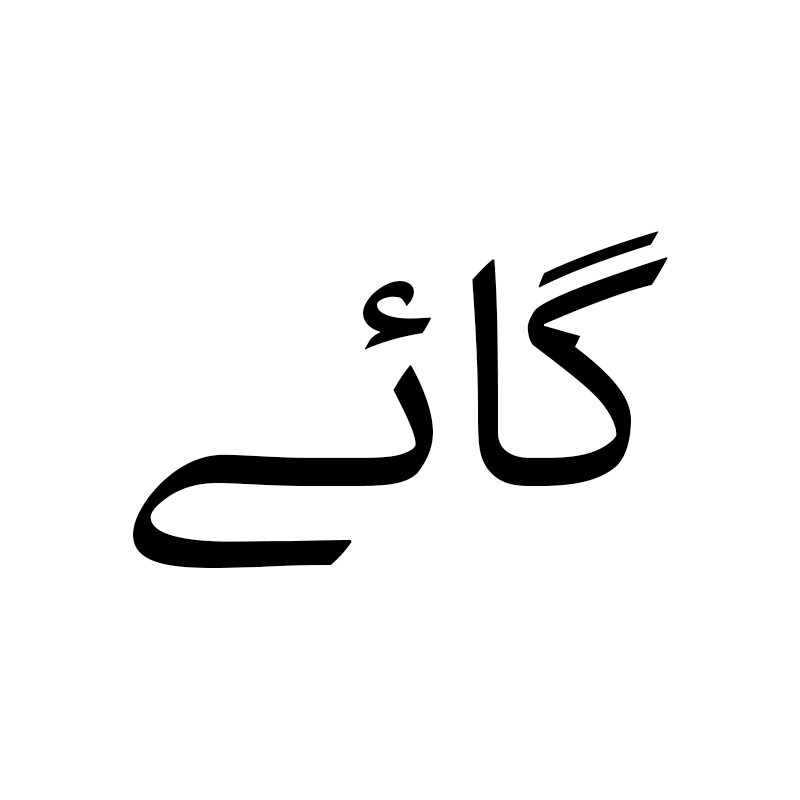
<style>
.page{position:relative;width:800px;height:800px;background:#ffffff}
.page>*{position:absolute;margin:0}
.t1{font:450px "AdobeArabic-Regular";color:#000000}
</style>
<div class="page">
<p class="t1" style="left:133px;top:231px;width:535px;height:337px">گائے</p>
</div>
